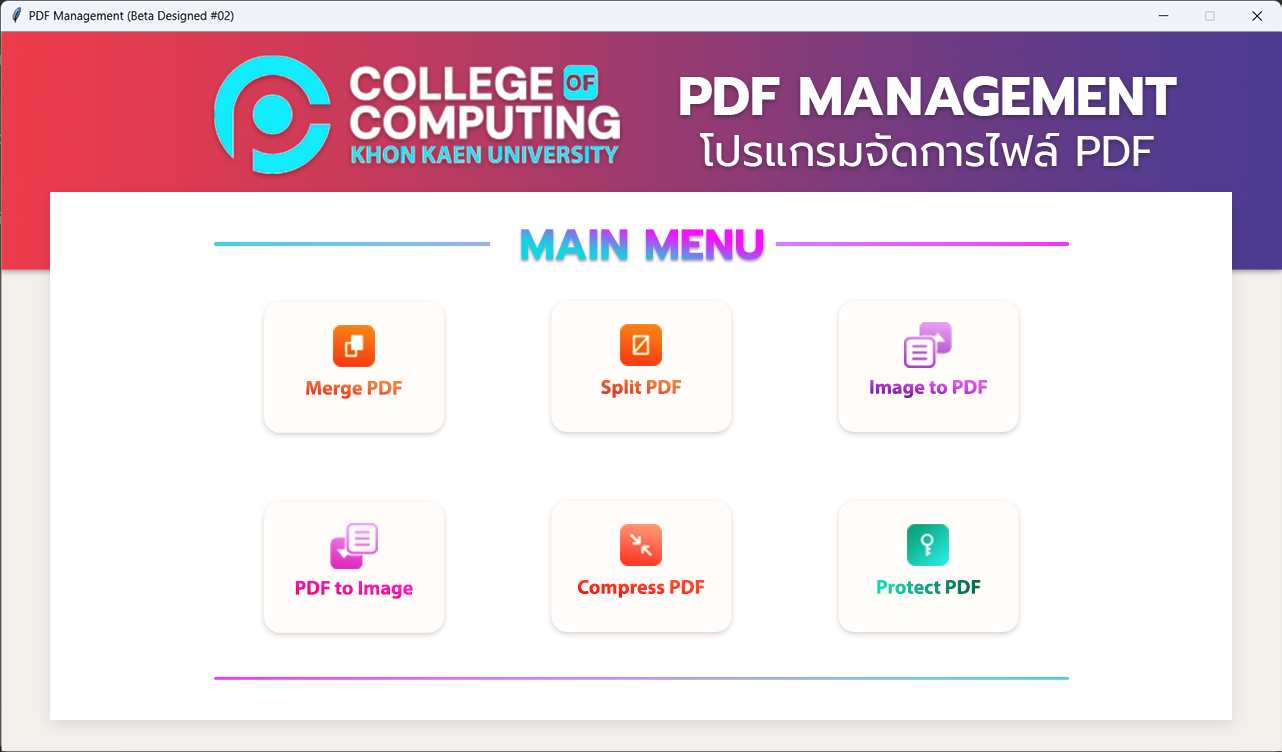
<style>
.page{position:relative;width:1282px;height:752px;background:#ffffff}
.page>*{position:absolute;margin:0}
.t1{font:43px "Prompt-Regular";color:#ffffff;text-transform:uppercase}
.t2{font:54.3px "Prompt-Bold";color:#ffffff;text-transform:uppercase}
.t3{font:43px "Prompt-Bold";text-transform:uppercase}
.t4{font:20px "MyriadPro-Bold"}
.t5{font:20px "MyriadPro-Bold";color:#fe351b}
</style>
<div class="page">
<p class="t1" style="left:680px;top:76px;width:497px;height:91px;text-align:center"><span class="t2">PDF Management<br></span>โปรแกรมจัดการไฟล์ PDF</p>
<p class="t3" style="left:521px;top:229px;width:243px;height:31px">Main menu</p>
<p class="t4" style="left:306px;top:380px;width:96px;height:19px">Merge PDF</p>
<p class="t4" style="left:601px;top:379px;width:80px;height:19px">Split PDF</p>
<p class="t4" style="left:870px;top:380px;width:117px;height:18px">Image to PDF</p>
<p class="t4" style="left:295px;top:580px;width:118px;height:19px">PDF to Image</p>
<p class="t5" style="left:578px;top:580px;width:127px;height:18px">Compress PDF</p>
<p class="t4" style="left:877px;top:580px;width:104px;height:14px">Protect PDF</p>
</div>
